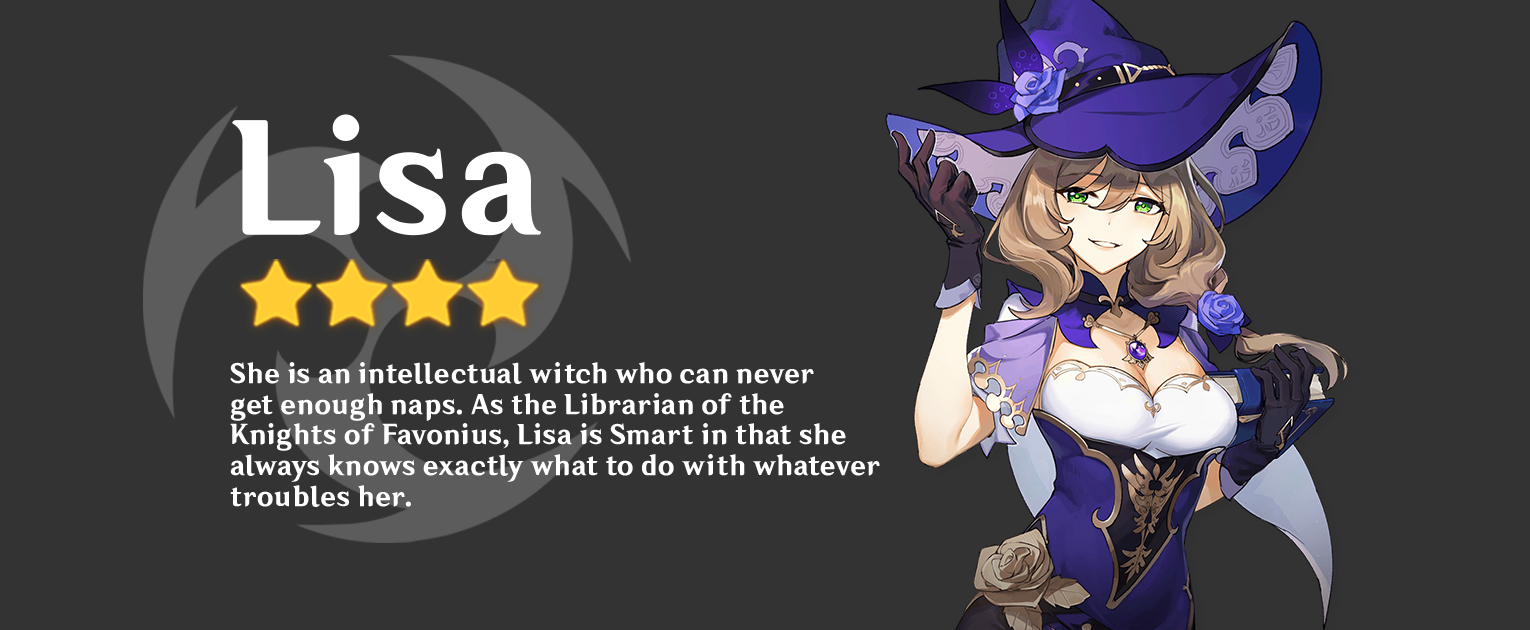
<style>
.page{position:relative;width:1530px;height:630px;background:#333333}
.page>*{position:absolute;margin:0}
.t1{font:146.3px "MiHoYo_SDK_JP_Web-85W";color:#ffffff}
.t2{font:25.7px "MiHoYo_SDK_JP_Web-85W";color:#ffffff}
</style>
<div class="page">
<p class="t1" style="left:232px;top:114px;width:309px;height:122px">Lisa</p>
<p class="t2" style="left:230px;top:362px;width:650px;height:145px">She is an intellectual witch who can never <br>get enough naps. As the Librarian of the <br>Knights of Favonius, Lisa is Smart in that she<br>always knows exactly what to do with whatever<br>troubles her.</p>
</div>
